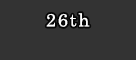
<style>
.page{position:relative;width:136px;height:60px;background:#333333}
.page>*{position:absolute;margin:0}
.t1{font:18px "Century";letter-spacing:0.1em;color:#ffffff}
</style>
<div class="page">
<p class="t1" style="left:46px;top:13px;width:44px;height:14px">26th</p>
</div>
